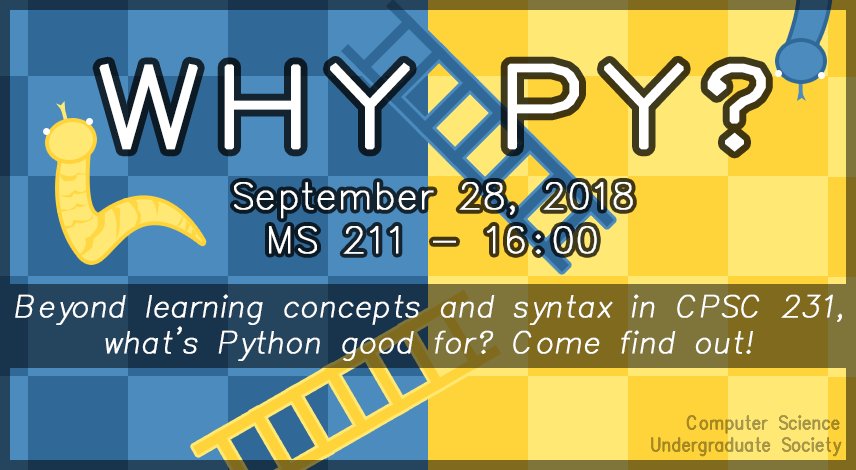
<style>
.page{position:relative;width:856px;height:470px}
.page>*{position:absolute;margin:0}
.t1{font:109.4px "Simplex_IV25";color:#ffffff;font-weight:bold;scale:1.16 1}
.t2{font:109.4px "Simplex_IV25";letter-spacing:0.125em;color:#ffffff;font-weight:bold;scale:1.16 1}
.t3{font:109.4px "Simplex_IV25";letter-spacing:0.1em;color:#ffffff;font-weight:bold;scale:1.16 1}
.t4{font:36.5px "Simplex_IV25";color:#ffffff;font-weight:bold;scale:0.92 1}
.t5{font:36.5px "Simplex_IV25";letter-spacing:0.02em;color:#ffffff;font-weight:bold;scale:0.92 1}
.t6{font:36.5px "Simplex_IV25";letter-spacing:-0.075em;color:#ffffff;font-weight:bold;scale:0.92 1}
.t7{font:36.5px "Simplex_IV25";letter-spacing:0.15em;color:#ffffff;font-weight:bold;scale:0.92 1}
.t8{font:30px "Simplex_IV25";letter-spacing:-0.025em;color:#ffffff;font-weight:bold;font-style:italic;scale:0.92 1}
.t9{font:18px "Simplex_IV25";font-weight:bold;scale:0.8 1}
</style>
<div class="page">
<p class="t1" style="left:99px;top:62px;width:667px;height:90px"><span class="t2">W</span>HY P<span class="t3">Y</span>?</p>
<p class="t4" style="left:234px;top:182px;width:399px;height:72px;text-align:center">S<span class="t5">e</span><span class="t6">p</span>tember 28, 2018<br>MS 211 - 1<span class="t7">6</span>:00</p>
<p class="t8" style="left:15px;top:294px;width:827px;height:67px;text-align:center">Beyond learning concepts and syntax in CPSC 231, what's Python good for? Come find out!</p>
<p class="t9" style="left:651px;top:415px;width:190px;height:41px;text-align:right">Computer Science <br>Undergraduate Society</p>
</div>
